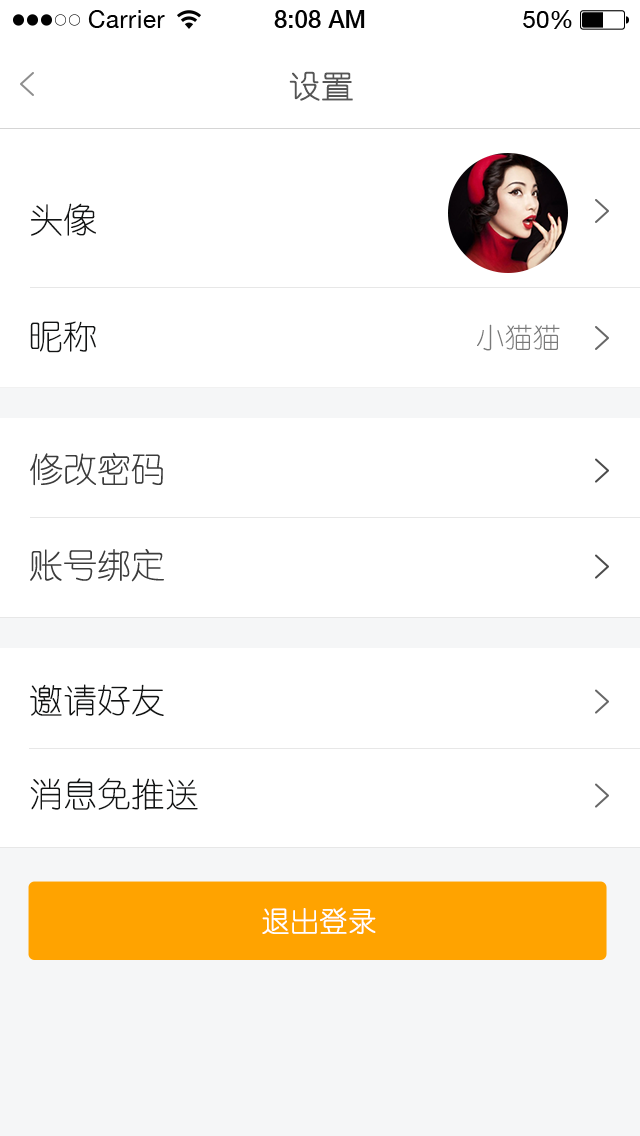
<style>
.page{position:relative;width:640px;height:1136px;background:#ffffff}
.page>*{position:absolute;margin:0}
.t1{font:32px "YouYuan";color:#555555;text-transform:uppercase;font-weight:bold}
.t2{font:34px "YouYuan";color:#121414}
.t3{font:28px "YouYuan";color:#797979}
.t4{font:34.1px "YouYuan";color:#3c3c3c}
.t5{font:34.1px "YouYuan";color:#121414}
.t6{font:28px "YouYuan";color:#ffffff;font-weight:bold}
</style>
<div class="page">
<p class="t1" style="left:289px;top:71px;width:64px;height:30px">设置</p>
<p class="t2" style="left:30px;top:203px;width:66px;height:33px">头像</p>
<p class="t2" style="left:30px;top:321px;width:66px;height:32px">昵称</p>
<p class="t3" style="left:477px;top:324px;width:83px;height:27px">小猫猫</p>
<p class="t4" style="left:30px;top:452px;width:133px;height:34px">修改密码</p>
<p class="t4" style="left:30px;top:549px;width:134px;height:33px">账号绑定</p>
<p class="t5" style="left:30px;top:684px;width:134px;height:33px">邀请好友</p>
<p class="t5" style="left:30px;top:777px;width:168px;height:33px">消息免推送</p>
<p class="t6" style="left:262px;top:907px;width:114px;height:27px">退出登录</p>
</div>
